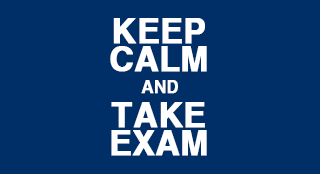
<style>
.page{position:relative;width:320px;height:174px;background:#002e66}
.page>*{position:absolute;margin:0}
.t1{font:60px/28px "Helvetica_cyr-Bold";color:#ffffff;font-weight:bold;scale:0.96 1}
.t2{font:30px "Helvetica-Bold";color:#ffffff;font-weight:bold;scale:0.96 1}
</style>
<div class="page">
<p class="t1" style="left:110px;top:18px;width:97px;height:138px;text-align:center">KEEP<br>CALM<br><br>TAKE<br>EXAM</p>
<p class="t2" style="left:141px;top:80px;width:37px;height:14px">AND</p>
</div>
